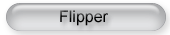
<style>
.page{position:relative;width:170px;height:35px}
.page>*{position:absolute;margin:0}
.t1{font:16px "ArialMT";color:#000000}
</style>
<div class="page">
<p class="t1" style="left:60px;top:10px;width:48px;height:16px">Flipper</p>
</div>
